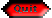
<style>
.page{position:relative;width:52px;height:18px;background:#ffffff}
.page>*{position:absolute;margin:0}
.t1{font:10px "LucidaSansUnicode";font-weight:bold}
</style>
<div class="page">
<p class="t1" style="left:14px;top:5px;width:23px;height:8px">Quit</p>
</div>
